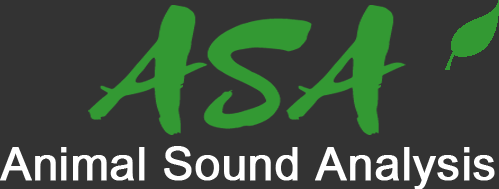
<style>
.page{position:relative;width:499px;height:189px;background:#333333}
.page>*{position:absolute;margin:0}
.t1{font:46px "ArialUnicodeMS";color:#ffffff;font-weight:bold}
</style>
<div class="page">
<p class="t1" style="left:0px;top:146px;width:495px;height:44px">Animal Sound Analysis</p>
</div>
